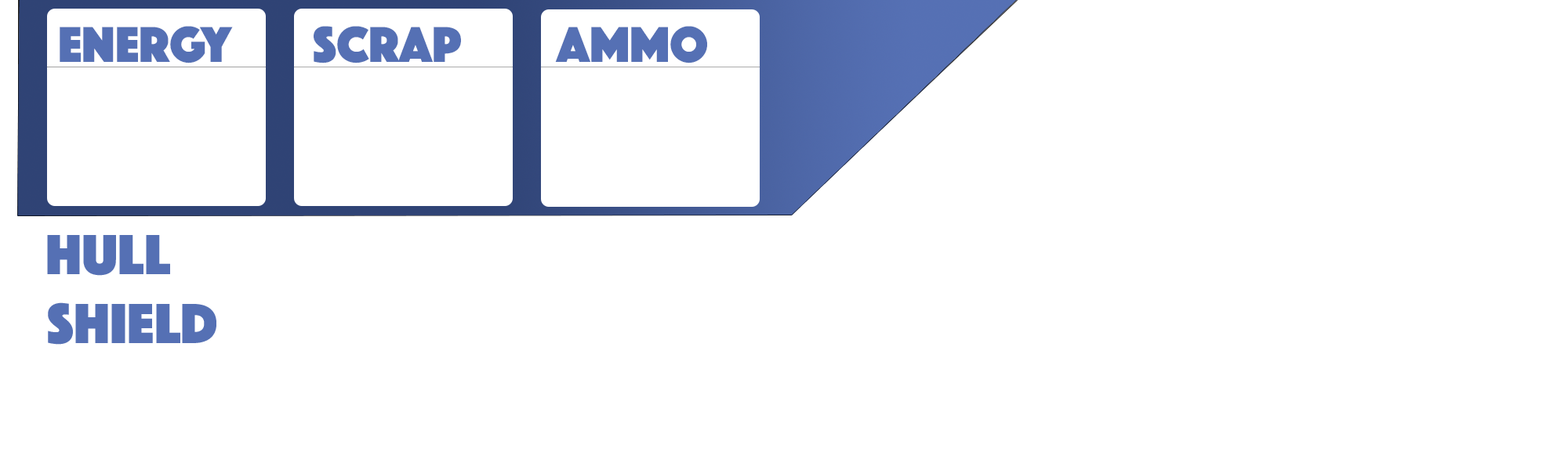
<style>
.page{position:relative;width:1568px;height:470px;background:#ffffff}
.page>*{position:absolute;margin:0}
.t1{font:52.3px "Phosphate-Solid";color:#5570b4}
.t2{font:58.8px "Phosphate-Solid";color:#5570b4}
</style>
<div class="page">
<p class="t1" style="left:60px;top:26px;width:173px;height:38px">Energy</p>
<p class="t1" style="left:314px;top:26px;width:147px;height:38px">Scrap</p>
<p class="t1" style="left:555px;top:26px;width:152px;height:38px">Ammo</p>
<p class="t2" style="left:47px;top:235px;width:123px;height:41px">hull</p>
<p class="t2" style="left:48px;top:303px;width:168px;height:42px">shield</p>
</div>
